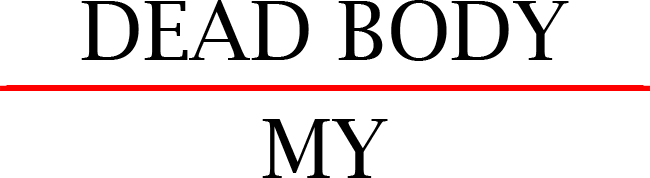
<style>
.page{position:relative;width:650px;height:178px;background:#ffffff}
.page>*{position:absolute;margin:0}
.t1{font:81.7px "LucidaBright";color:#000000}
</style>
<div class="page">
<p class="t1" style="left:81px;top:0px;width:488px;height:61px">DEAD BODY</p>
<p class="t1" style="left:262px;top:119px;width:126px;height:59px">MY</p>
</div>
